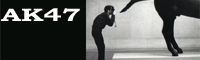
<style>
.page{position:relative;width:200px;height:60px;background:#080c08}
.page>*{position:absolute;margin:0}
.t1{font:18px "BookmanOldStyle-Bold";color:#ffffff;scale:1.55 1}
</style>
<div class="page">
<p class="t1" style="left:1px;top:8px;width:79px;height:13px">AK47</p>
</div>
